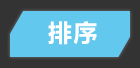
<style>
.page{position:relative;width:140px;height:68px;background:#62c8ee}
.page>*{position:absolute;margin:0}
.t1{font:24px "MicrosoftYaHei";letter-spacing:0.05em;color:#ffffff}
</style>
<div class="page">
<p class="t1" style="left:48px;top:21px;width:49px;height:24px">排序</p>
</div>
